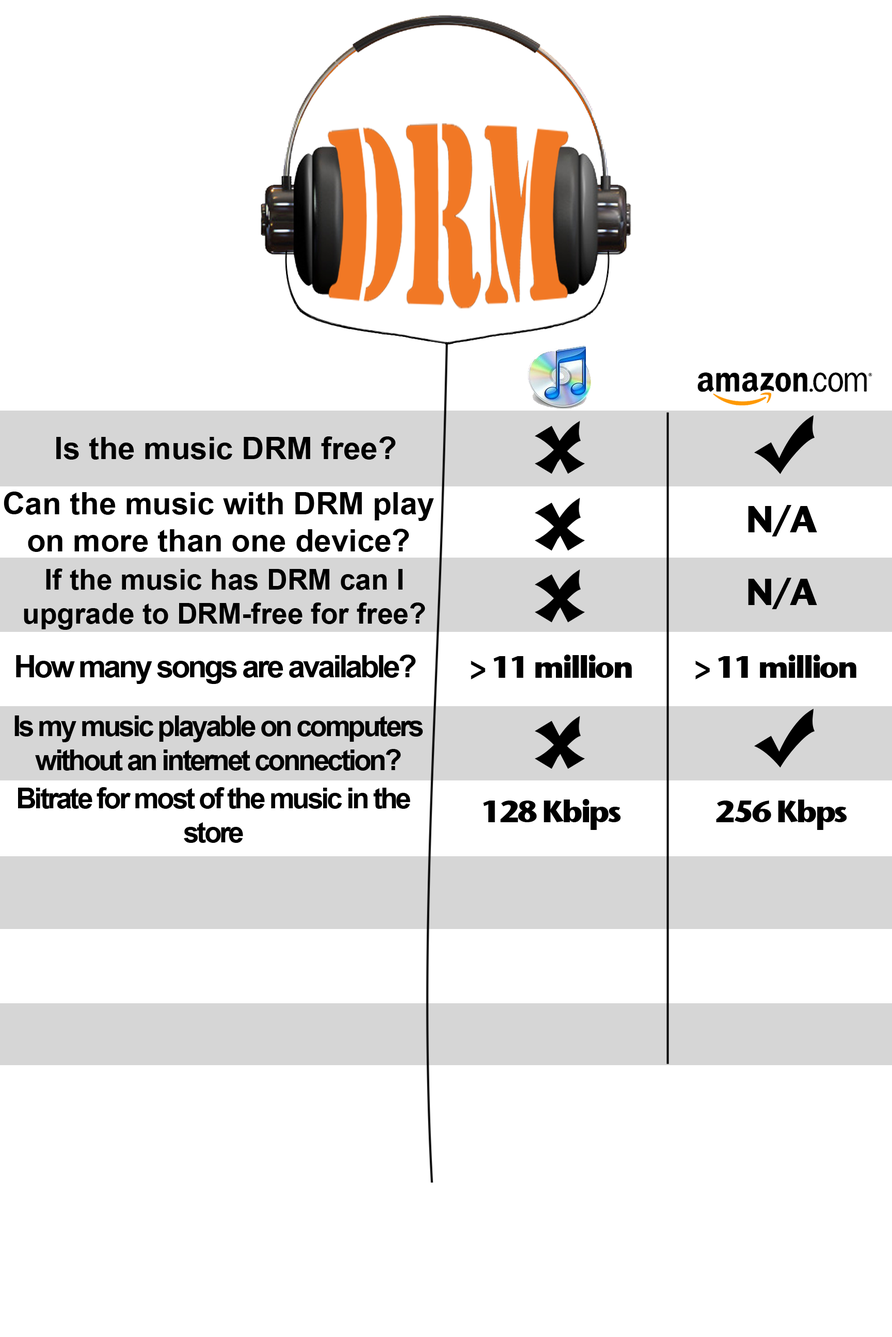
<style>
.page{position:relative;width:892px;height:1337px;background:#ffffff}
.page>*{position:absolute;margin:0}
.t1{font:31px "Arial-BoldMT";color:#000000}
.t2{font:37.2px "StoneSansITC-Bold";letter-spacing:-0.075em;color:#000000}
.t3{font:28.4px "Arial-BoldMT";color:#000000}
.t4{font:31px "Arial-BoldMT";letter-spacing:-0.075em;color:#000000}
.t5{font:31px "StoneSansITC-Bold";letter-spacing:-0.075em;color:#000000}
.t6{font:28.4px "Arial-BoldMT";letter-spacing:-0.075em;color:#000000}
</style>
<div class="page">
<p class="t1" style="left:56px;top:437px;width:339px;height:23px">Is the music DRM free?</p>
<p class="t1" style="left:4px;top:492px;width:430px;height:60px;text-align:center">Can the music with DRM play on more than one device?</p>
<p class="t2" style="left:748px;top:505px;width:69px;height:32px">N/A</p>
<p class="t3" style="left:24px;top:569px;width:401px;height:61px;text-align:center">If the music has DRM can I <br>upgrade to DRM-free for free?</p>
<p class="t2" style="left:748px;top:578px;width:69px;height:31px">N/A</p>
<p class="t4" style="left:16px;top:655px;width:399px;height:29px">How many songs are available?</p>
<p class="t5" style="left:471px;top:655px;width:161px;height:25px">&gt; 11 million</p>
<p class="t5" style="left:695px;top:655px;width:161px;height:25px">&gt; 11 million</p>
<p class="t6" style="left:14px;top:716px;width:409px;height:55px;text-align:center">Is my music playable on computers without an internet connection?</p>
<p class="t6" style="left:18px;top:787px;width:392px;height:56px;text-align:center">Bitrate for most of the music in the store</p>
<p class="t5" style="left:483px;top:799px;width:138px;height:31px">128 Kbips</p>
<p class="t5" style="left:716px;top:800px;width:131px;height:30px">256 Kbps</p>
</div>
